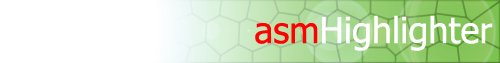
<style>
.page{position:relative;width:500px;height:63px;background:#ffffff}
.page>*{position:absolute;margin:0}
.t1{font:36px "Tahoma";color:#ffffff}
.t2{font:36px "Tahoma";color:#ff0101}
</style>
<div class="page">
<p class="t1" style="left:255px;top:15px;width:238px;height:36px"><span class="t2">asm</span>Highlighter</p>
</div>
